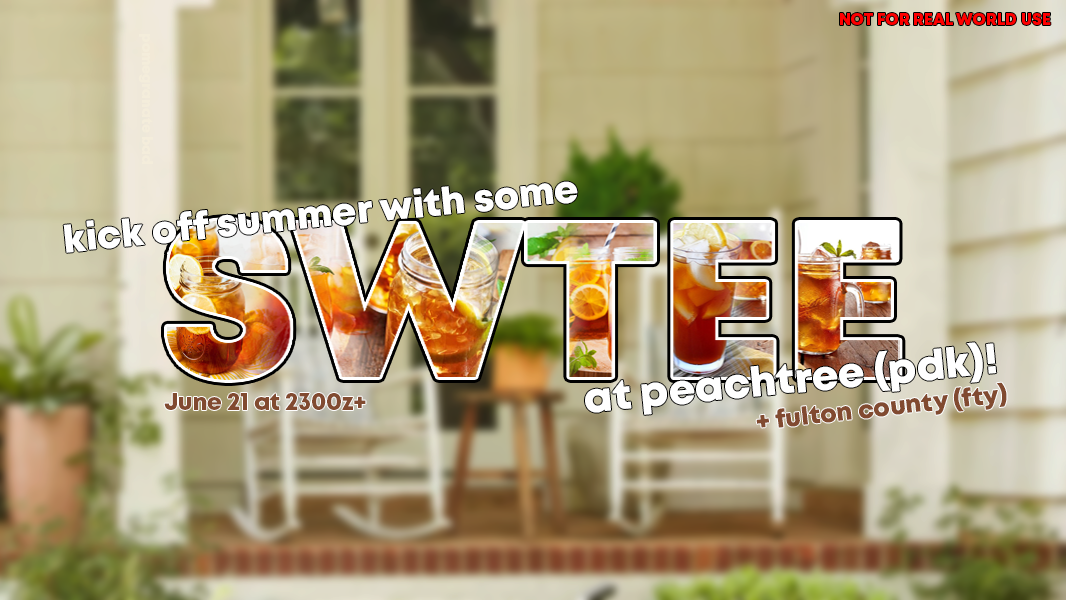
<style>
.page{position:relative;width:1066px;height:600px}
.page>*{position:absolute;margin:0}
.t1{font:16px "Mont-HeavyDEMO";color:#ff0000}
.t2{font:14px "Mont-HeavyDEMO";color:#f4eddb}
.t3{font:38px "Mont-HeavyDEMO";color:#ffffff}
.t4{font:41.4px "Mont-HeavyDEMO";color:#ffffff}
.t5{font:25px "Mont-HeavyDEMO";color:#814a30}
.t6{font:23px "Mont-HeavyDEMO";color:#814a30}
</style>
<div class="page">
<p class="t1" style="left:840px;top:13px;width:211px;height:12px">NOT FOR REAL WORLD USE</p>
<p class="t2" style="left:138px;top:34px;width:15px;height:130px;rotate:90deg">pomegranate bad</p>
<p class="t3" style="left:63px;top:181px;width:515px;height:72px;rotate:-6deg">kick off summer with some</p>
<p class="t4" style="left:585px;top:342px;width:412px;height:73px;rotate:-5deg">at peachtree (pdk)!</p>
<p class="t5" style="left:756px;top:382px;width:251px;height:46px;rotate:-6deg">+ fulton county (fty)</p>
<p class="t6" style="left:164px;top:393px;width:202px;height:17px">June 21 at 2300z+</p>
</div>
